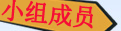
<style>
.page{position:relative;width:121px;height:31px;background:#e2a53a}
.page>*{position:absolute;margin:0}
.t1{font:24px "SimSun";color:#f60f35;font-weight:bold}
</style>
<div class="page">
<p class="t1" style="left:1px;top:0px;width:92px;height:29px;rotate:5deg">小组成员</p>
</div>
